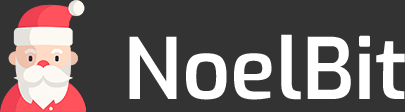
<style>
.page{position:relative;width:405px;height:112px;background:#333333}
.page>*{position:absolute;margin:0}
.t1{font:84.3px "Exo-SemiBold";color:#ffffff}
</style>
<div class="page">
<p class="t1" style="left:129px;top:34px;width:276px;height:66px">NoelBit</p>
</div>
